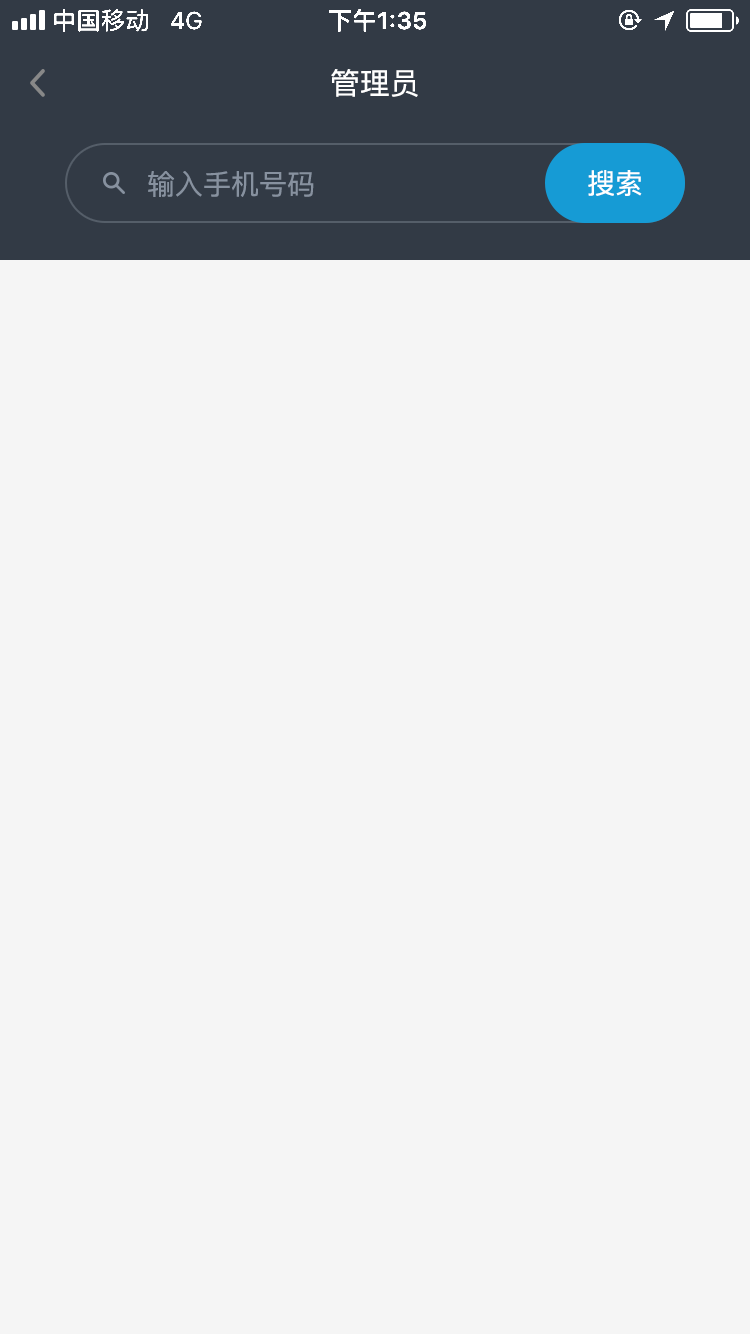
<style>
.page{position:relative;width:750px;height:1334px;background:#f5f5f5}
.page>*{position:absolute;margin:0}
.t1{font:30px "PingFangSC-Regular";color:#ffffff}
.t2{font:28px "PingFangSC-Regular";color:#87919f}
.t3{font:28px "PingFangSC-Regular";color:#ffffff}
</style>
<div class="page">
<p class="t1" style="left:331px;top:69px;width:87px;height:28px">管理员</p>
<p class="t2" style="left:148px;top:171px;width:166px;height:26px">输入手机号码</p>
<p class="t3" style="left:588px;top:170px;width:54px;height:26px">搜索</p>
</div>
